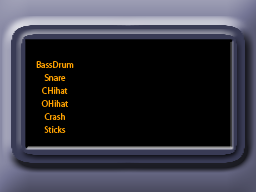
<style>
.page{position:relative;width:256px;height:192px;background:#000000}
.page>*{position:absolute;margin:0}
.t1{font:9px/13px "MyriadPro-Regular";color:#ffa200}
</style>
<div class="page">
<p class="t1" style="left:36px;top:61px;width:38px;height:72px;text-align:center">BassDrum<br>Snare<br>CHihat<br>OHihat<br>Crash<br>Sticks</p>
</div>
